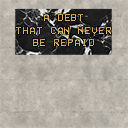
<style>
.page{position:relative;width:128px;height:128px}
.page>*{position:absolute;margin:0}
.t1{font:10.3px "VCROSDMono";letter-spacing:0.01em;color:#d9af62;scale:1.13 1}
</style>
<div class="page">
<p class="t1" style="left:16px;top:14px;width:95px;height:32px;text-align:center">A DEBT<br>THAT CAN NEVER<br>BE REPAID</p>
</div>
